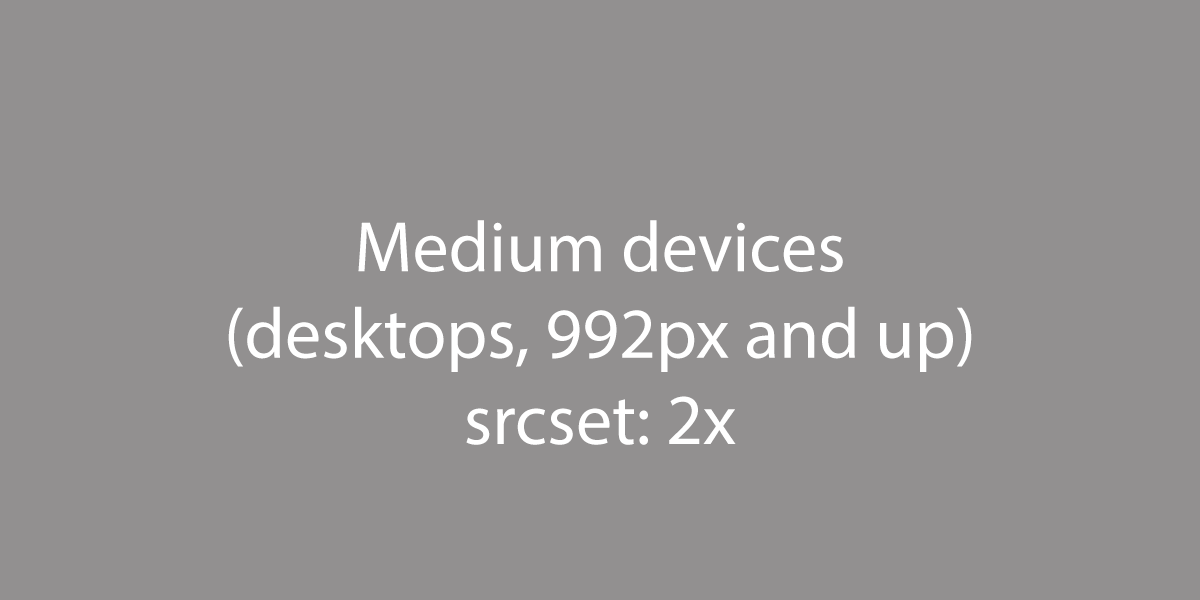
<style>
.page{position:relative;width:1200px;height:600px;background:#929090}
.page>*{position:absolute;margin:0}
.t1{font:72px "MyriadPro-Regular";color:#ffffff}
</style>
<div class="page">
<p class="t1" style="left:228px;top:220px;width:744px;height:225px;text-align:center">Medium devices <br>(desktops, 992px and up)<br>srcset: 2x</p>
</div>
